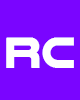
<style>
.page{position:relative;width:80px;height:100px;background:#7a05ff}
.page>*{position:absolute;margin:0}
.t1{font:44.8px "NulshockRg-Bold";color:#ffffff}
</style>
<div class="page">
<p class="t1" style="left:6px;top:37px;width:34px;height:31px">R</p>
<p class="t1" style="left:42px;top:37px;width:32px;height:31px">C</p>
</div>
